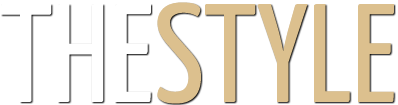
<style>
.page{position:relative;width:398px;height:105px;background:#ffffff}
.page>*{position:absolute;margin:0}
.t1{font:140px "YanoneKaffeesatz-Regular";color:#dcc08e}
.t2{font:140px "YanoneKaffeesatz-Regular";color:#ffffff}
</style>
<div class="page">
<p class="t1" style="left:1px;top:2px;width:393px;height:102px"><span class="t2">THE</span>STYLE</p>
</div>
